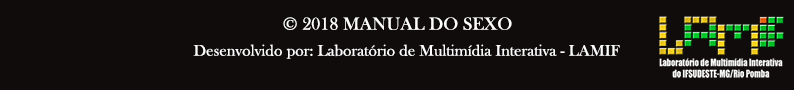
<style>
.page{position:relative;width:794px;height:90px;background:#100c0c}
.page>*{position:absolute;margin:0}
.t1{font:18px "BaskOldFace";color:#ffffff}
.t2{font:16px "BaskOldFace";color:#ffffff}
</style>
<div class="page">
<p class="t1" style="left:283px;top:17px;width:229px;height:13px">© 2018 MANUAL DO SEXO</p>
<p class="t2" style="left:193px;top:44px;width:427px;height:15px">Desenvolvido por: Laboratório de Multimídia Interativa - LAMIF</p>
</div>
